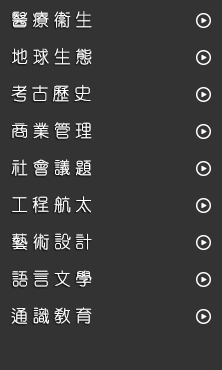
<style>
.page{position:relative;width:222px;height:370px;background:#333333}
.page>*{position:absolute;margin:0}
.t1{font:18px/37px "¥þ¯u²Ó¶êÅé";letter-spacing:0.2em;color:#ffffff}
.t2{font:18px/37px "¥þ¯u²Ó¶êÅé";letter-spacing:0.14em;color:#ffffff}
</style>
<div class="page">
<p class="t1" style="left:11px;top:11px;width:81px;height:313px">醫療衛生<br>地球生態<br><span class="t2">考</span>古歷史<br>商業管理<br>社會議題<br>工程航太             <br>藝術設計<br>語言文學<br>通識教育</p>
<p class="t1" style="left:11px;top:11px;width:81px;height:313px;opacity:0.46">醫療衛生<br>地球生態<br><span class="t2">考</span>古歷史<br>商業管理<br>社會議題<br>工程航太             <br>藝術設計<br>語言文學<br>通識教育</p>
</div>
